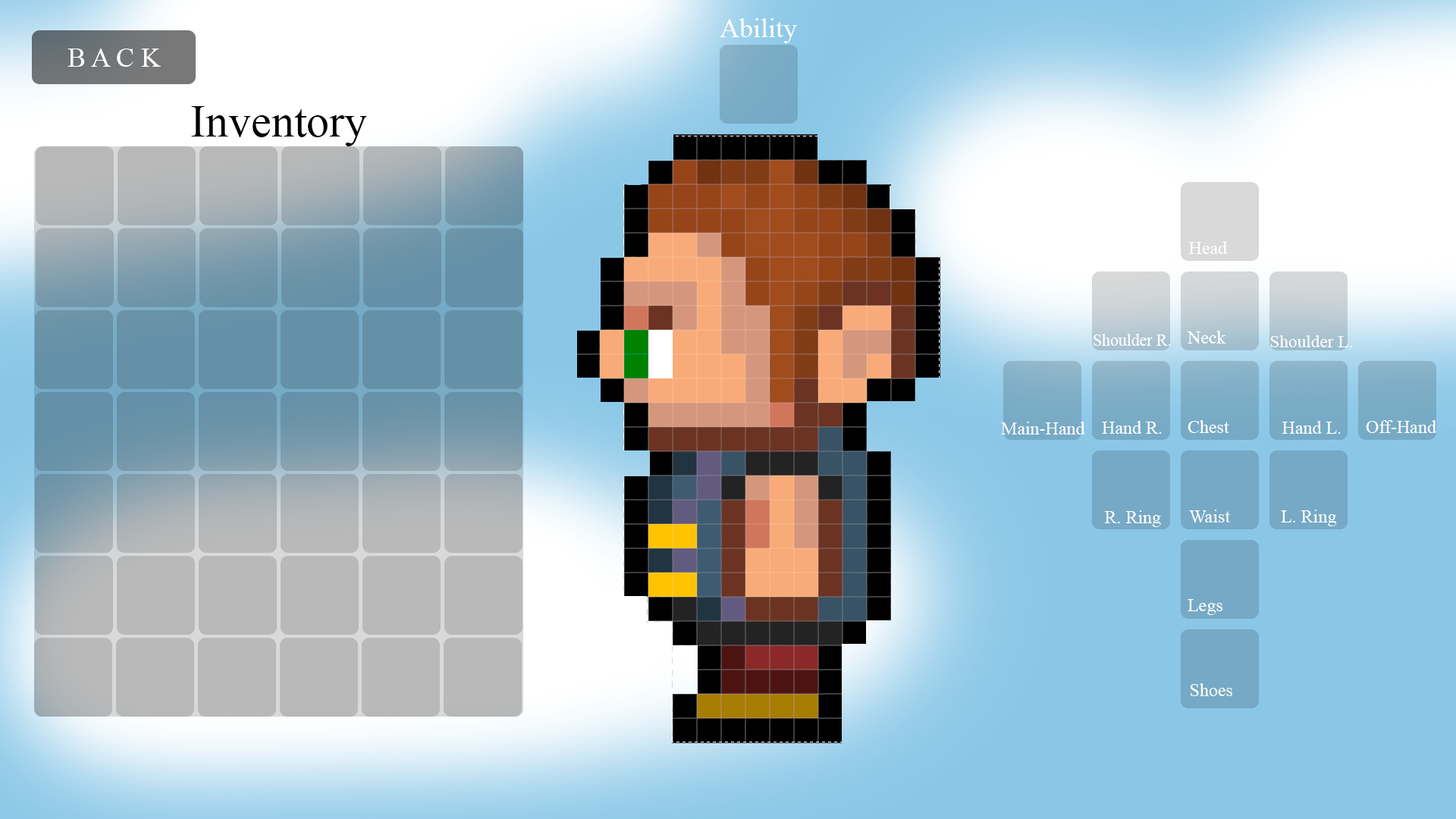
<style>
.page{position:relative;width:1456px;height:819px}
.page>*{position:absolute;margin:0}
.t1{font:27.3px "TimesNewRomanPSMT";color:#ffffff}
.t2{font:45.5px "TimesNewRomanPSMT";color:#000000}
.t3{font:18.2px "TimesNewRomanPSMT";color:#ffffff}
.t4{font:16.5px "TimesNewRomanPSMT";color:#ffffff}
.t5{font:17.6px "TimesNewRomanPSMT";color:#ffffff}
</style>
<div class="page">
<p class="t1" style="left:720px;top:18px;width:77px;height:25px">Ability</p>
<p class="t1" style="left:67px;top:49px;width:94px;height:18px">B A C K</p>
<p class="t2" style="left:191px;top:106px;width:176px;height:40px">Inventory</p>
<p class="t3" style="left:1188px;top:241px;width:39px;height:13px">Head</p>
<p class="t4" style="left:1094px;top:334px;width:77px;height:12px">Shoulder R.</p>
<p class="t3" style="left:1187px;top:331px;width:39px;height:13px">Neck</p>
<p class="t5" style="left:1270px;top:335px;width:82px;height:12px">Shoulder L.</p>
<p class="t3" style="left:1001px;top:422px;width:84px;height:13px">Main-Hand</p>
<p class="t3" style="left:1102px;top:421px;width:60px;height:13px">Hand R.</p>
<p class="t3" style="left:1188px;top:420px;width:41px;height:13px">Chest</p>
<p class="t3" style="left:1282px;top:421px;width:59px;height:13px">Hand L.</p>
<p class="t3" style="left:1366px;top:420px;width:70px;height:13px">Off-Hand</p>
<p class="t3" style="left:1189px;top:510px;width:41px;height:12px">Waist</p>
<p class="t3" style="left:1281px;top:510px;width:56px;height:16px">L. Ring</p>
<p class="t3" style="left:1104px;top:510px;width:57px;height:17px">R. Ring</p>
<p class="t3" style="left:1188px;top:599px;width:34px;height:16px">Legs</p>
<p class="t3" style="left:1190px;top:683px;width:42px;height:13px">Shoes</p>
</div>
